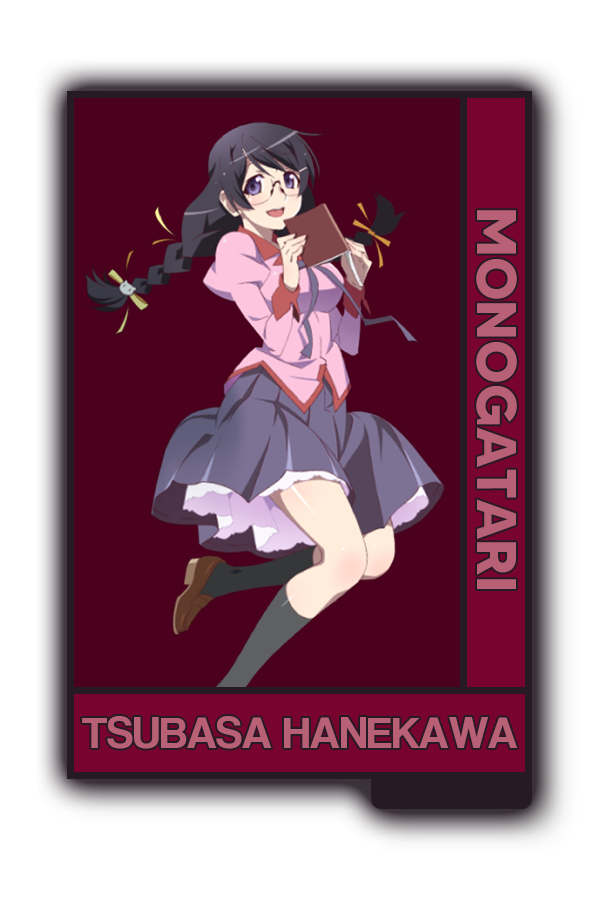
<style>
.page{position:relative;width:600px;height:900px;background:#4b011d}
.page>*{position:absolute;margin:0}
.t1{font:55.8px "MADETOMMY-Bold";color:#b86076}
.t2{font:46.1px "CoolveticaRg-Regular";color:#b86076}
</style>
<div class="page">
<p class="t1" style="left:476px;top:210px;width:41px;height:379px;rotate:90deg">MONOGATARI</p>
<p class="t2" style="left:82px;top:716px;width:436px;height:33px">TSUBASA HANEKAWA</p>
</div>
